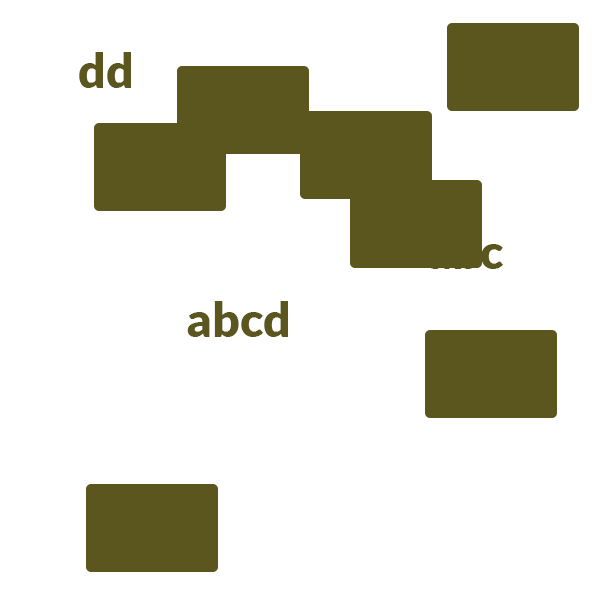
<style>
.page{position:relative;width:600px;height:600px;background:#ffffff}
.page>*{position:absolute;margin:0}
.t1{font:48px "Lato-Black";color:#5b551e}
</style>
<div class="page">
<p class="t1" style="left:79px;top:52px;width:52px;height:36px">dd</p>
<p class="t1" style="left:427px;top:233px;width:76px;height:36px">abc</p>
<p class="t1" style="left:187px;top:301px;width:101px;height:36px">abcd</p>
</div>
